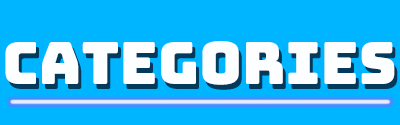
<style>
.page{position:relative;width:400px;height:125px;background:#00b5ff}
.page>*{position:absolute;margin:0}
.t1{font:58.3px "BungeeLayers-Regular";color:#fcfeff}
</style>
<div class="page">
<p class="t1" style="left:5px;top:41px;width:390px;height:44px">categories</p>
</div>
